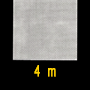
<style>
.page{position:relative;width:90px;height:90px;background:#000000}
.page>*{position:absolute;margin:0}
.t1{font:15px "ArialMT";letter-spacing:0.2em;color:#ffd200;font-weight:bold;scale:0.67 1}
</style>
<div class="page">
<p class="t1" style="left:34px;top:65px;width:22px;height:12px">4 m</p>
</div>
